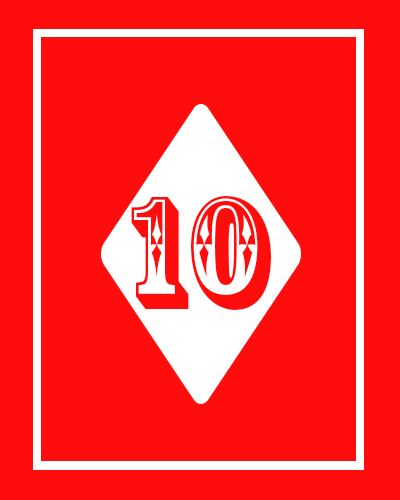
<style>
.page{position:relative;width:400px;height:500px;background:#ff0d0d}
.page>*{position:absolute;margin:0}
.t1{font:150px "RosewoodStd-Regular";color:#ff0d0d}
</style>
<div class="page">
<p class="t1" style="left:131px;top:196px;width:140px;height:114px">10</p>
</div>
